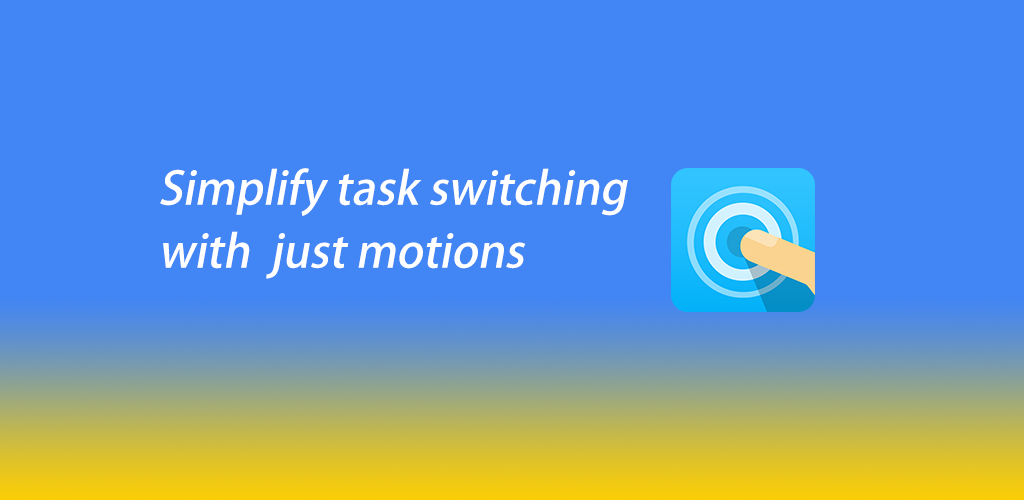
<style>
.page{position:relative;width:1024px;height:500px;background:#4285f4}
.page>*{position:absolute;margin:0}
.t1{font:45px "AdobeHeitiStd-Regular";color:#ffffff;font-style:italic}
</style>
<div class="page">
<p class="t1" style="left:160px;top:168px;width:468px;height:111px">Simplify task switching<br>with  just motions</p>
</div>
